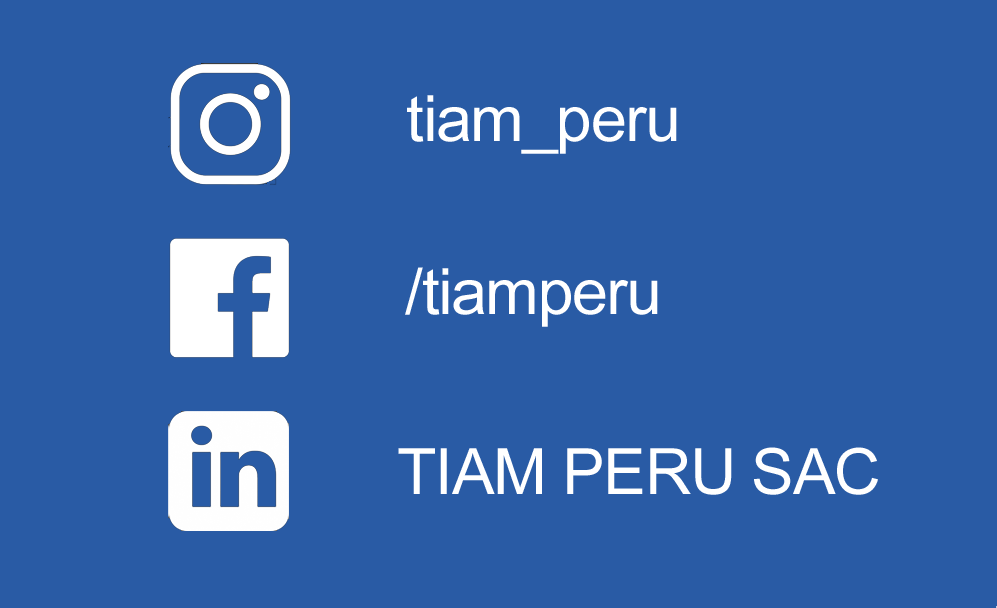
<style>
.page{position:relative;width:997px;height:608px;background:#295ba5}
.page>*{position:absolute;margin:0}
.t1{font:63.6px "ArialMT";letter-spacing:-0.022em;color:#ffffff}
</style>
<div class="page">
<p class="t1" style="left:407px;top:95px;width:270px;height:59px">tiam_peru</p>
<p class="t1" style="left:405px;top:267px;width:253px;height:60px">/tiamperu</p>
<p class="t1" style="left:398px;top:447px;width:480px;height:48px">TIAM PERU SAC</p>
</div>
